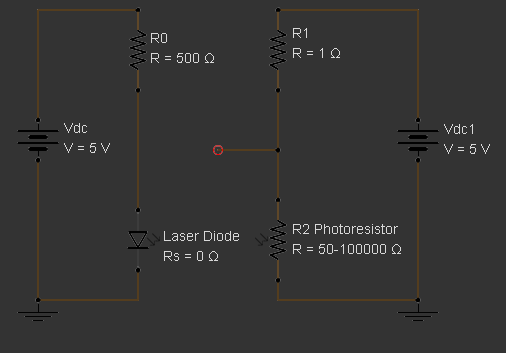
<style>
.page{position:relative;width:506px;height:353px;background:#333333}
.page>*{position:absolute;margin:0}
.t1{font:13.9px "ArialMT";color:#d8d8d8}
</style>
<div class="page">
<p class="t1" style="left:293px;top:28px;width:47px;height:30px">R1<br>R = 1 Ω</p>
<p class="t1" style="left:151px;top:33px;width:63px;height:30px">R0<br>R = 500 Ω</p>
<p class="t1" style="left:64px;top:123px;width:46px;height:30px">Vdc<br>V = 5 V</p>
<p class="t1" style="left:444px;top:124px;width:46px;height:30px">Vdc1<br>V = 5 V</p>
<p class="t1" style="left:164px;top:231px;width:75px;height:30px">Laser Diode<br>Rs = 0 Ω</p>
<p class="t1" style="left:293px;top:224px;width:108px;height:30px">R2 Photoresistor<br>R = 50-100000 Ω</p>
</div>
